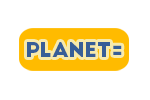
<style>
.page{position:relative;width:150px;height:100px;background:#ffffff}
.page>*{position:absolute;margin:0}
.t1{font:20px "BigJohn";color:#375e97}
</style>
<div class="page">
<p class="t1" style="left:27px;top:42px;width:95px;height:15px">Planet=</p>
</div>
